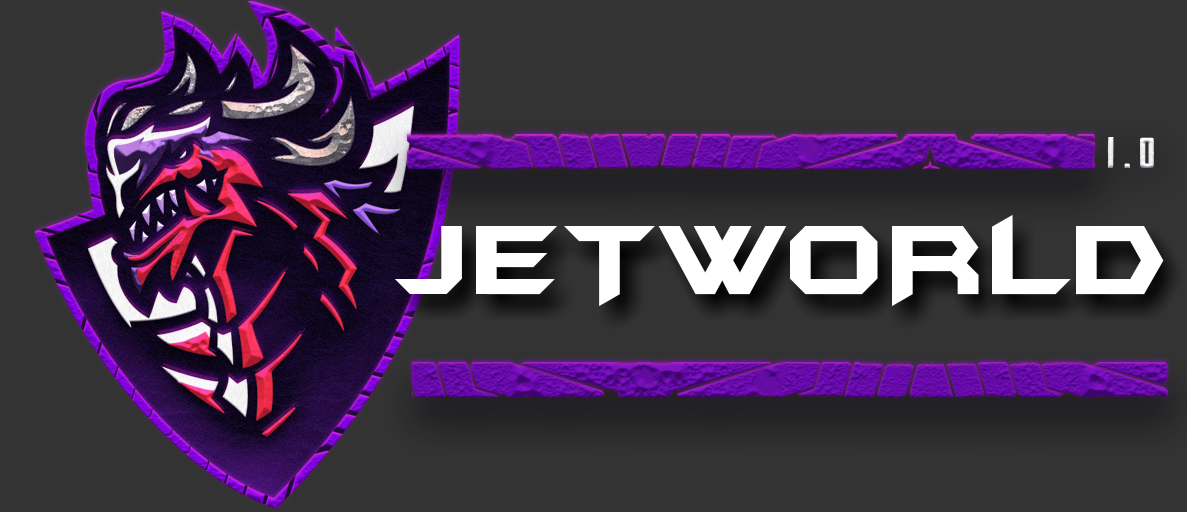
<style>
.page{position:relative;width:1187px;height:512px;background:#333333}
.page>*{position:absolute;margin:0}
.t1{font:115px "BatmanForeverAlternate";color:#ffffff}
</style>
<div class="page">
<p class="t1" style="left:395px;top:215px;width:769px;height:91px">JETWORLD</p>
</div>
